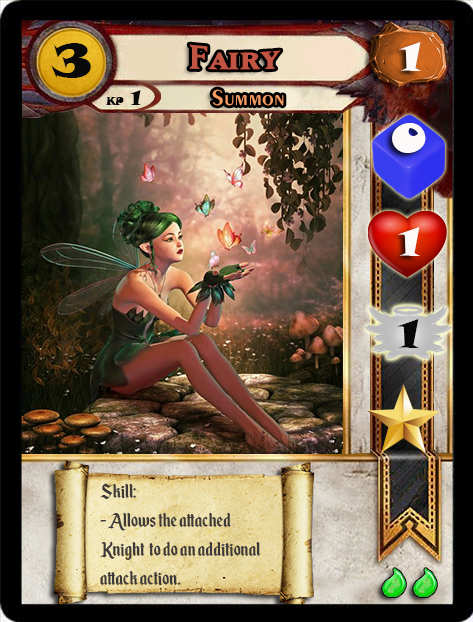
<style>
.page{position:relative;width:473px;height:622px}
.page>*{position:absolute;margin:0}
.t1{font:46.6px "SnapITC-Regular";color:#090909;scale:1.05 1}
.t2{font:40px "MatrixBoldSmallCaps";color:#c25443;scale:1.06 1}
.t3{font:40px "SnapITC-Regular";color:#fef9f9;scale:1.05 1}
.t4{font:22.7px "Exotic350BT-DemiBold";color:#f89c64;scale:1.06 1}
.t5{font:20.5px "SnapITC-Regular";color:#090909}
.t6{font:40px "SnapITC-Regular";color:#090909;scale:1.05 1}
.t7{font:24px "EnchantedLand";color:#3e3939}
</style>
<div class="page">
<p class="t1" style="left:51px;top:43px;width:40px;height:35px">3</p>
<p class="t2" style="left:189px;top:44px;width:92px;height:26px">Fairy</p>
<p class="t3" style="left:399px;top:42px;width:22px;height:29px">1</p>
<p class="t4" style="left:212px;top:89px;width:72px;height:17px">Summon</p>
<p class="t5" style="left:130px;top:90px;width:11px;height:15px">1</p>
<p class="t3" style="left:392px;top:123px;width:34px;height:30px">0</p>
<p class="t3" style="left:398px;top:227px;width:22px;height:29px">1</p>
<p class="t6" style="left:397px;top:319px;width:22px;height:29px">1</p>
<p class="t7" style="left:100px;top:483px;width:160px;height:103px">Skill:<br>- Allows the attached Knight  to do an additional attack action.</p>
</div>
